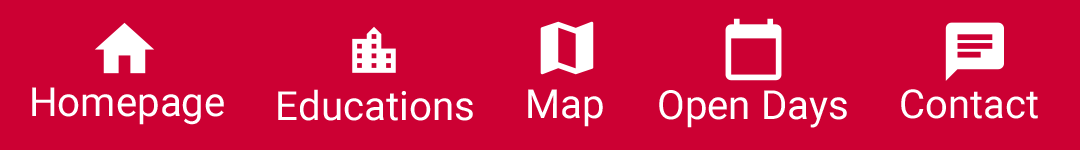
<style>
.page{position:relative;width:1080px;height:150px;background:#cc0033}
.page>*{position:absolute;margin:0}
.t1{font:40.2px "Roboto-Regular";color:#ffffff}
.t2{font:40px "Roboto-Regular";color:#ffffff}
</style>
<div class="page">
<p class="t1" style="left:32px;top:87px;width:192px;height:38px">Homepage</p>
<p class="t1" style="left:278px;top:89px;width:195px;height:32px">Educations</p>
<p class="t1" style="left:528px;top:89px;width:75px;height:38px">Map</p>
<p class="t2" style="left:901px;top:89px;width:137px;height:30px">Contact</p>
<p class="t1" style="left:659px;top:90px;width:188px;height:38px">Open Days</p>
</div>
